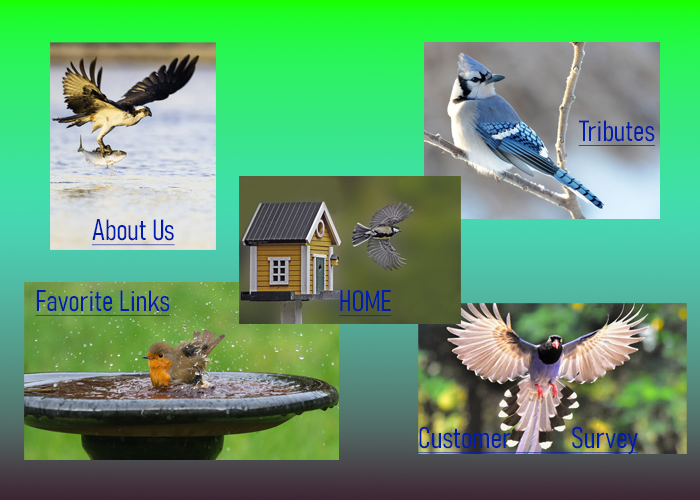
<style>
.page{position:relative;width:700px;height:500px}
.page>*{position:absolute;margin:0}
.t1{font:29px "Bahnschrift-LightCondensed";color:#001dad;font-style:italic;text-decoration:underline}
.t2{font:29.6px "Bahnschrift-LightCondensed";color:#001dad;font-style:italic;text-decoration:underline}
</style>
<div class="page">
<p class="t1" style="left:578px;top:120px;width:77px;height:26px">Tributes</p>
<p class="t1" style="left:91px;top:219px;width:84px;height:27px">About Us</p>
<p class="t1" style="left:35px;top:290px;width:135px;height:26px">Favorite Links</p>
<p class="t1" style="left:339px;top:290px;width:53px;height:27px">HOME</p>
<p class="t2" style="left:417px;top:426px;width:222px;height:28px">Customer          Survey</p>
</div>
